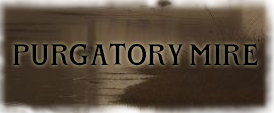
<style>
.page{position:relative;width:274px;height:113px}
.page>*{position:absolute;margin:0}
.t1{font:24px "DevilCandlePERSONALUSE-Regular";letter-spacing:0.025em;color:#000000}
</style>
<div class="page">
<p class="t1" style="left:12px;top:42px;width:246px;height:24px">PURGATORY MIRE</p>
</div>
